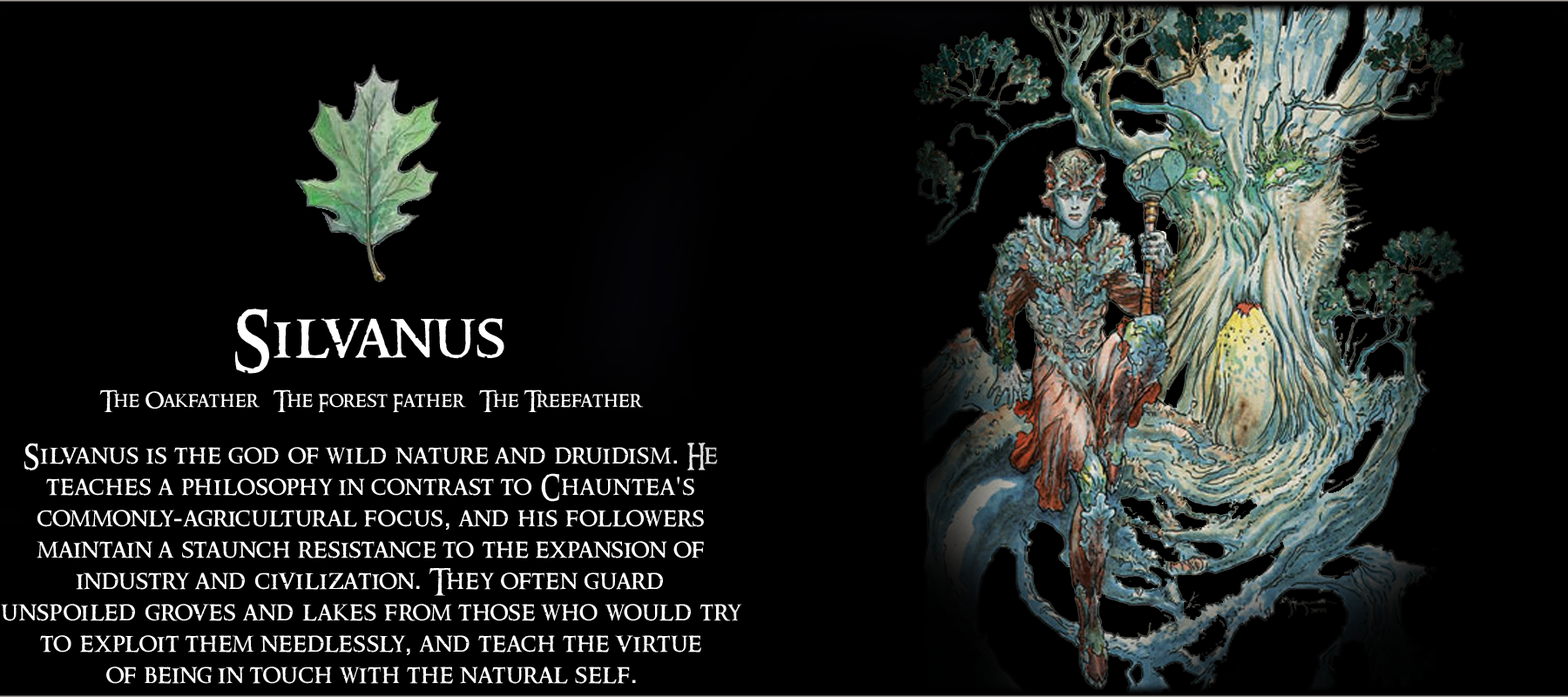
<style>
.page{position:relative;width:1568px;height:697px;background:#000000}
.page>*{position:absolute;margin:0}
.t1{font:26.1px "RingbearerMedium";letter-spacing:0.025em;color:#ffffff}
.t2{font:62.7px "RingbearerMedium";letter-spacing:0.025em;color:#ffffff}
.t3{font:20.9px "RingbearerMedium";letter-spacing:0.025em;color:#ffffff}
.t4{font:26.1px "Rockwell";letter-spacing:0.025em;color:#ffffff}
</style>
<div class="page">
<p class="t1" style="left:1px;top:308px;width:741px;height:376px;text-align:center"><span class="t2">Silvanus<br></span><span class="t3"><br>The Oakfather   The Forest Father   The Treefather<br><br></span>Silvanus is the god of wild nature and druidism<span class="t4">.</span> He teaches a philosophy in contrast to Chauntea<span class="t4">'</span>s <br>commonly<span class="t4">-</span>agricultural focus<span class="t4">,</span> and his followers <br>maintain a staunch resistance to the expansion of <br>industry and civilization<span class="t4">.</span> They often guard <br>unspoiled groves and lakes from those who would try to exploit them needlessly<span class="t4">,</span> and teach the virtue <br>of being in touch with the natural self<span class="t4">.</span></p>
</div>
